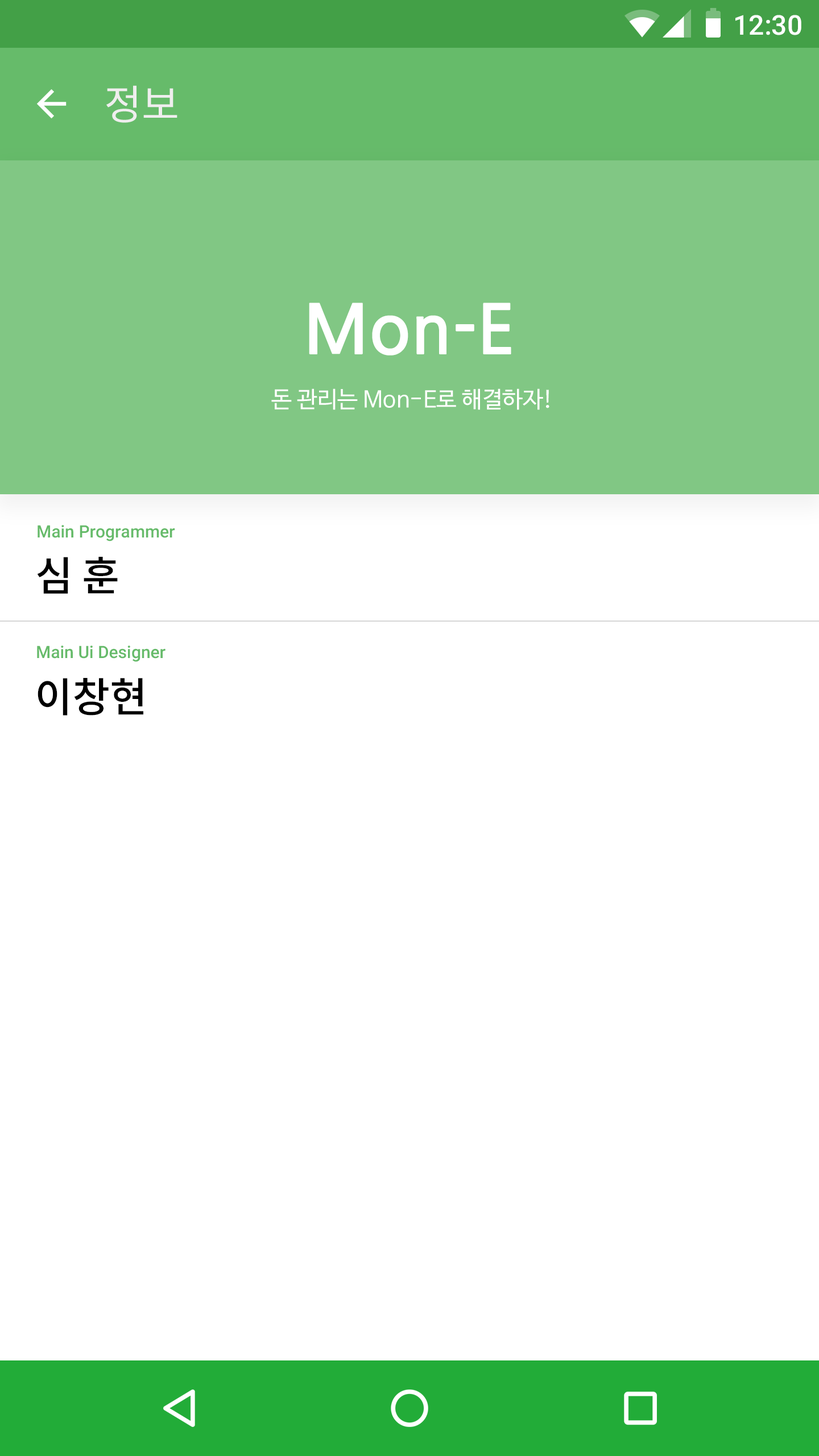
<style>
.page{position:relative;width:819px;height:1456px;background:#ffffff}
.page>*{position:absolute;margin:0}
.t1{font:27.3px "Roboto-Medium";color:#ffffff}
.t2{font:40.9px "NotoSansCJKkr-Regular";color:#efeeee}
.t3{font:68.2px "NanumGothicBold";color:#ffffff}
.t4{font:22.7px "NanumBarunGothic";color:#ffffff}
.t5{font:17.1px "Roboto-Medium";color:#66bb6a}
.t6{font:40.9px "NotoSansCJKkr-Medium";color:#000000}
.t7{font:41px "NotoSansCJKkr-Medium";color:#000000}
</style>
<div class="page">
<p class="t1" style="left:735px;top:15px;width:66px;height:20px">12:30</p>
<p class="t2" style="left:106px;top:85px;width:71px;height:38px">정보</p>
<p class="t3" style="left:309px;top:303px;width:202px;height:52px">Mon-E</p>
<p class="t4" style="left:271px;top:388px;width:278px;height:22px">돈 관리는 Mon-E로 해결하자!</p>
<p class="t5" style="left:38px;top:525px;width:137px;height:16px">Main Programmer</p>
<p class="t6" style="left:37px;top:557px;width:81px;height:37px">심 훈</p>
<p class="t5" style="left:37px;top:646px;width:129px;height:16px">Main Ui Designer</p>
<p class="t7" style="left:38px;top:678px;width:105px;height:37px">이창현</p>
</div>
